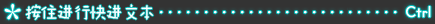
<style>
.page{position:relative;width:435px;height:24px;background:#333333}
.page>*{position:absolute;margin:0}
.t1{font:18px "¢è?";color:#ffffff}
</style>
<div class="page">
<p class="t1" style="left:25px;top:4px;width:129px;height:16px">按住进行快进文本</p>
</div>
